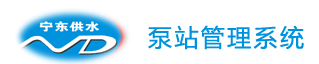
<style>
.page{position:relative;width:319px;height:64px;background:#ffffff}
.page>*{position:absolute;margin:0}
.t1{font:24px "MicrosoftYaHei";letter-spacing:0.1em;color:#0093dd}
</style>
<div class="page">
<p class="t1" style="left:148px;top:25px;width:156px;height:25px">泵站管理系统</p>
</div>
